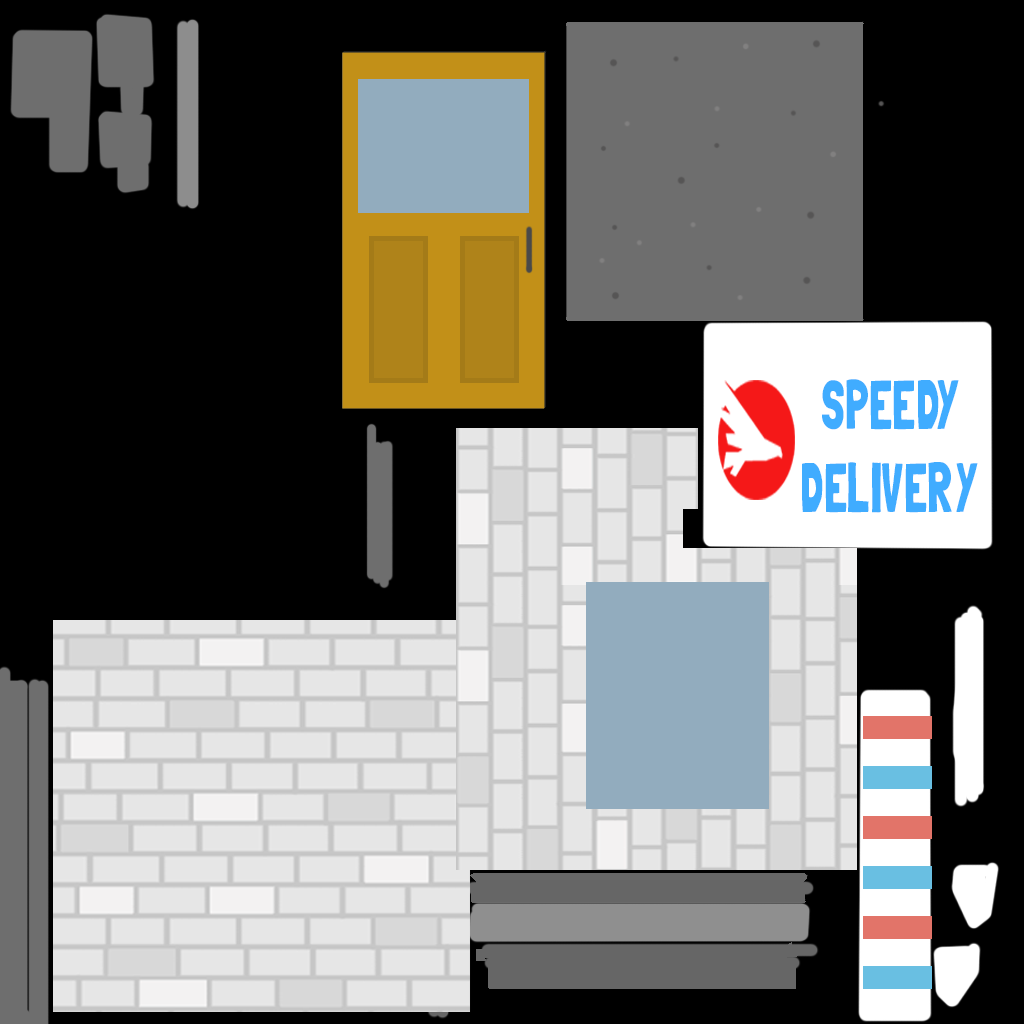
<style>
.page{position:relative;width:1024px;height:1024px;background:#000000}
.page>*{position:absolute;margin:0}
.t1{font:69.9px "LondrinaSolid-Regular";color:#40acff;scale:0.69 1}
</style>
<div class="page">
<p class="t1" style="left:802px;top:379px;width:176px;height:134px;text-align:center">SPEEDY<br>DELIVERY</p>
</div>
